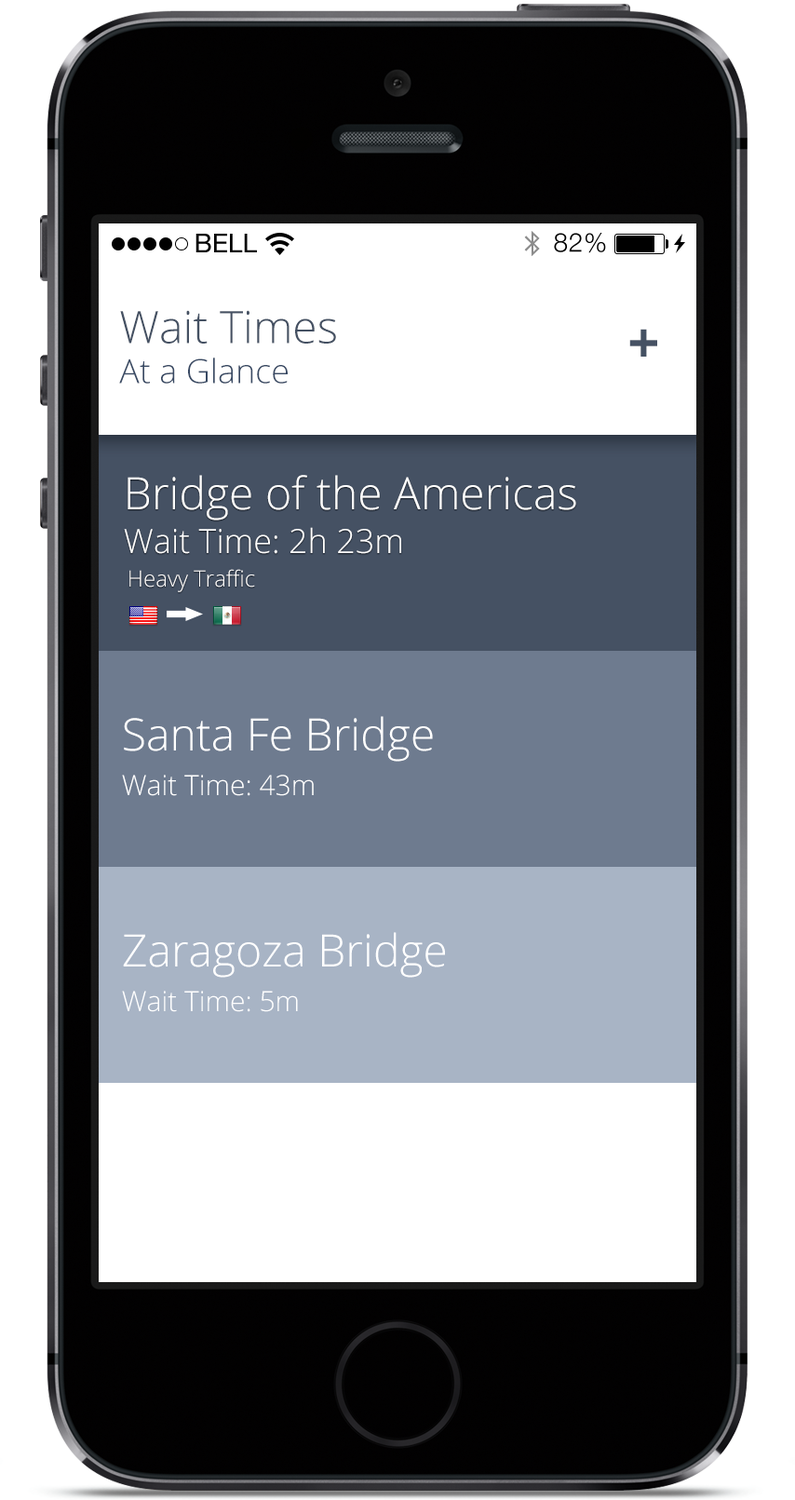
<style>
.page{position:relative;width:795px;height:1500px;background:#ffffff}
.page>*{position:absolute;margin:0}
.t1{font:44.7px "OpenSans-Light";color:#455163}
.t2{font:55.9px "OpenSans-Bold";color:#455163}
.t3{font:33.5px "OpenSans-Light";color:#394a64}
.t4{font:44.7px "OpenSans-Light";color:#fefefe}
.t5{font:33.5px "OpenSans-Light";color:#fefefe}
.t6{font:22.3px "OpenSans-Light";color:#fffefe}
.t7{font:44.7px "OpenSans-Light";color:#ffffff}
.t8{font:27.9px "OpenSans-Light";color:#ffffff}
</style>
<div class="page">
<p class="t1" style="left:120px;top:310px;width:216px;height:34px">Wait Times</p>
<p class="t2" style="left:629px;top:329px;width:28px;height:28px">+</p>
<p class="t3" style="left:119px;top:357px;width:169px;height:27px">At a Glance</p>
<p class="t4" style="left:128px;top:475px;width:448px;height:45px">Bridge of the Americas</p>
<p class="t5" style="left:124px;top:527px;width:277px;height:27px">Wait Time: 2h 23m</p>
<p class="t6" style="left:129px;top:569px;width:126px;height:23px">Heavy Traffic</p>
<p class="t7" style="left:124px;top:716px;width:309px;height:46px">Santa Fe Bridge</p>
<p class="t8" style="left:122px;top:775px;width:192px;height:21px">Wait Time: 43m</p>
<p class="t7" style="left:123px;top:932px;width:322px;height:46px">Zaragoza Bridge</p>
<p class="t8" style="left:122px;top:991px;width:176px;height:21px">Wait Time: 5m</p>
</div>
